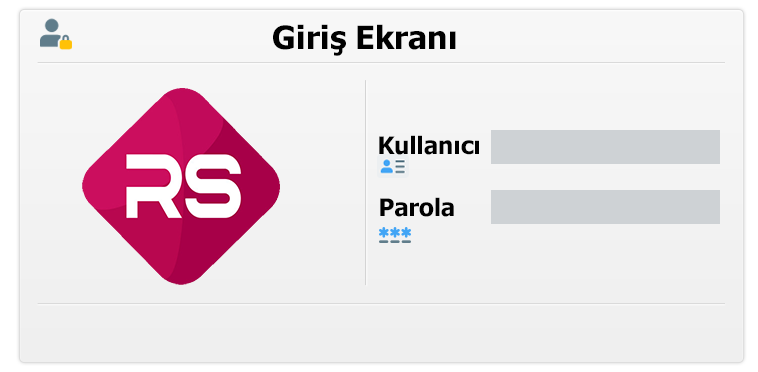
<style>
.page{position:relative;width:758px;height:372px}
.page>*{position:absolute;margin:0}
.t1{font:32px "Tahoma-Bold";color:#000000}
.t2{font:24px "Tahoma-Bold";color:#000000}
</style>
<div class="page">
<p class="t1" style="left:273px;top:24px;width:183px;height:32px">Giriş Ekranı</p>
<p class="t2" style="left:379px;top:135px;width:100px;height:20px">Kullanıcı</p>
<p class="t2" style="left:380px;top:197px;width:74px;height:20px">Parola</p>
</div>
